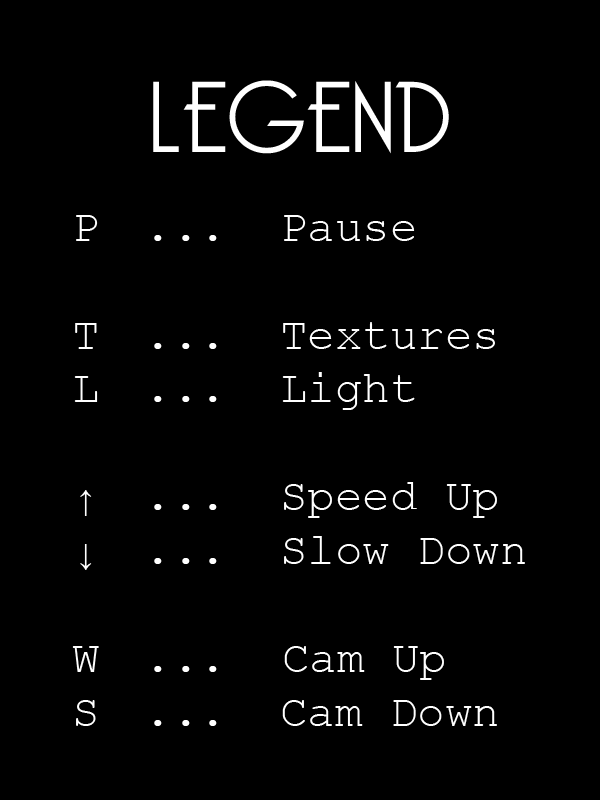
<style>
.page{position:relative;width:600px;height:800px;background:#000000}
.page>*{position:absolute;margin:0}
.t1{font:44.9px "CourierNewPSMT";color:#ffffff}
.t2{font:49px "MyriadPro-Regular";color:#ffffff}
.t3{font:98px "BelleroseLight";color:#ffffff}
</style>
<div class="page">
<p class="t1" style="left:72px;top:80px;width:453px;height:646px;text-align:center"><span class="t2"><br></span><span class="t3">LEGEND<br>  </span>P  ...  Pause<br><br>  T  ...  Textures<br>  L  ...  Light<br><br>  ↑  ...  Speed Up<br>  ↓  ...  Slow Down<br><br>  W  ...  Cam Up<br>  S  ...  Cam Down</p>
</div>
